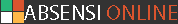
<style>
.page{position:relative;width:178px;height:24px;background:#333333}
.page>*{position:absolute;margin:0}
.t1{font:22px "MyriadPro-Regular";color:#ffffff}
.t2{font:22px "MyriadPro-Regular";color:#da542e}
</style>
<div class="page">
<p class="t1" style="left:24px;top:5px;width:153px;height:15px">ABSENSI <span class="t2">ONLINE</span></p>
</div>
